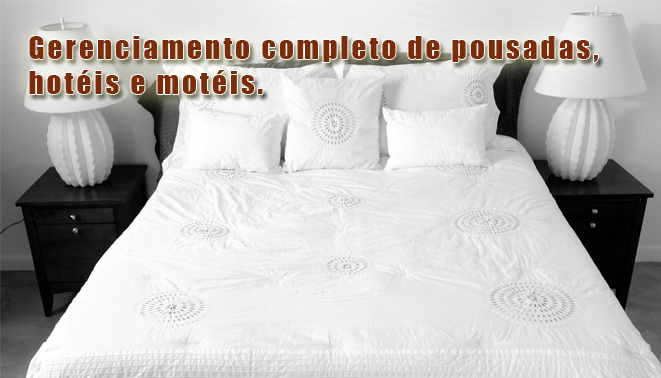
<style>
.page{position:relative;width:661px;height:378px}
.page>*{position:absolute;margin:0}
.t1{font:29.4px "Impact";letter-spacing:0.1em;color:#792d0b}
</style>
<div class="page">
<p class="t1" style="left:29px;top:36px;width:569px;height:58px">Gerenciamento completo de pousadas, <br>hotéis e motéis.</p>
</div>
